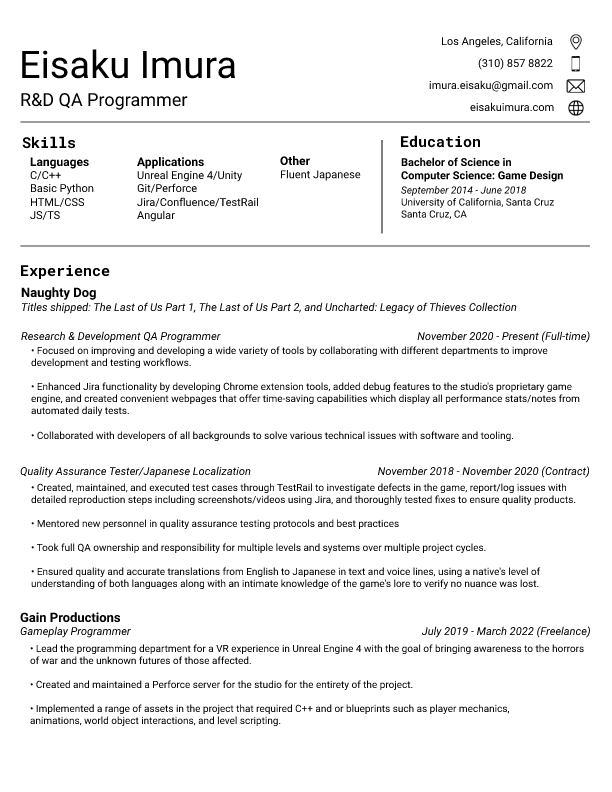
<style>
.page{position:relative;width:612px;height:792px;background:#ffffff}
.page>*{position:absolute;margin:0}
.t1{font:11px "Roboto-Regular";color:#000000}
.t2{font:38px "Roboto-Regular";color:#000000}
.t3{font:18px "Roboto-Regular";color:#000000}
.t4{font:15px "RobotoMono-Bold";color:#000000}
.t5{font:12px "Roboto-Bold";color:#000000}
.t6{font:11px "Roboto-Bold";color:#000000}
.t7{font:10px "Roboto-Italic";color:#000000}
.t8{font:10px "Roboto-Regular";color:#000000}
.t9{font:11px "Roboto-Italic";color:#000000}
.t10{font:13px "Roboto-Bold";color:#000000}
</style>
<div class="page">
<p class="t1" style="left:442px;top:36px;width:111px;height:12px">Los Angeles, California</p>
<p class="t2" style="left:22px;top:49px;width:213px;height:30px">Eisaku Imura</p>
<p class="t1" style="left:478px;top:58px;width:75px;height:12px">(310) 857 8822</p>
<p class="t1" style="left:429px;top:80px;width:124px;height:12px">imura.eisaku@gmail.com</p>
<p class="t3" style="left:21px;top:93px;width:167px;height:17px">R&amp;D QA Programmer</p>
<p class="t1" style="left:470px;top:102px;width:84px;height:9px">eisakuimura.com</p>
<p class="t4" style="left:22px;top:136px;width:53px;height:13px">Skills</p>
<p class="t4" style="left:401px;top:135px;width:79px;height:13px">Education</p>
<p class="t1" style="left:30px;top:157px;width:64px;height:63px"><span class="t5">Languages<br></span>C/C++<br>Basic Python<br>HTML/CSS<br>JS/TS</p>
<p class="t1" style="left:137px;top:157px;width:121px;height:65px"><span class="t5">Applications<br></span>Unreal Engine 4/Unity<br>Git/Perforce<br>Jira/Confluence/TestRail<br>Angular</p>
<p class="t1" style="left:280px;top:156px;width:81px;height:25px"><span class="t5">Other<br></span>Fluent Japanese</p>
<p class="t6" style="left:401px;top:157px;width:162px;height:63px">Bachelor of Science in <br>Computer Science: Game Design<br><span class="t7">September 2014 - June 2018<br></span><span class="t8">University of California, Santa Cruz<br>Santa Cruz, CA</span></p>
<p class="t4" style="left:21px;top:265px;width:89px;height:14px">Experience</p>
<p class="t9" style="left:21px;top:287px;width:569px;height:56px"><span class="t10">Naughty Dog<br></span>Titles shipped: The Last of Us Part 1, The Last of Us Part 2, and Uncharted: Legacy of Thieves Collection<br><br>Research &amp; Development QA Programmer                                                                         November 2020 - Present (Full-time)</p>
<p class="t8" style="left:31px;top:346px;width:549px;height:244px">• Focused on improving and developing a wide variety of tools by collaborating with different departments to improve<br>development and testing workflows.<br><br>• Enhanced Jira functionality by developing Chrome extension tools, added debug features to the studio's proprietary game <br>engine, and created convenient webpages that offer time-saving capabilities which display all performance stats/notes from <br>automated daily tests.<br><br>• Collaborated with developers of all backgrounds to solve various technical issues with software and tooling.<br><br><br><br>• Created, maintained, and executed test cases through TestRail to investigate defects in the game, report/log issues with <br>detailed reproduction steps including screenshots/videos using Jira, and thoroughly tested fixes to ensure quality products.<br><br>• Mentored new personnel in quality assurance testing protocols and best practices<br><br>• Took full QA ownership and responsibility for multiple levels and systems over multiple project cycles.<br><br>• Ensured quality and accurate translations from English to Japanese in text and voice lines, using a native's level of <br>understanding of both languages along with an intimate knowledge of the game's lore to verify no nuance was lost.</p>
<p class="t9" style="left:20px;top:466px;width:570px;height:12px">Quality Assurance Tester/Japanese Localization                                               November 2018 - November 2020 (Contract)</p>
<p class="t9" style="left:20px;top:612px;width:570px;height:26px"><span class="t10">Gain Productions<br></span>Gameplay Programmer                                                                                                            July 2019 - March 2022 (Freelance)</p>
<p class="t8" style="left:30px;top:644px;width:554px;height:83px">• Lead the programming department for a VR experience in Unreal Engine 4 with the goal of bringing awareness to the horrors<br>of war and the unknown futures of those affected.<br><br>• Created and maintained a Perforce server for the studio for the entirety of the project.<br><br>• Implemented a range of assets in the project that required C++ and or blueprints such as player mechanics, <br>animations, world object interactions, and level scripting.</p>
</div>
